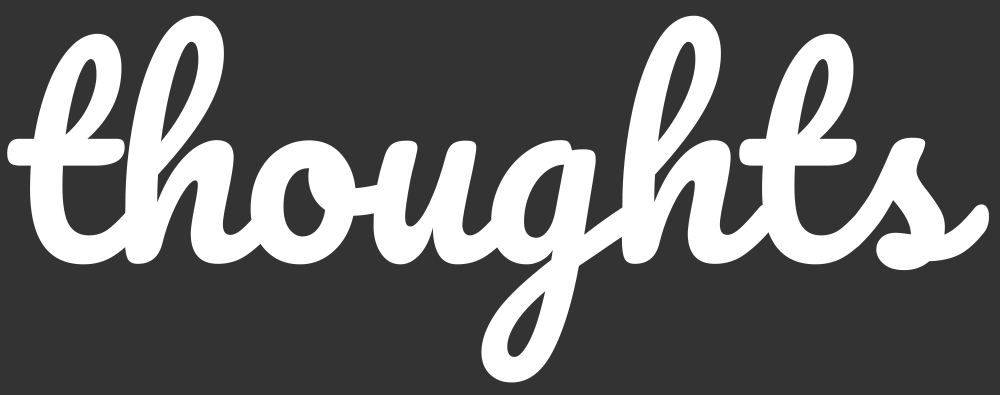
<style>
.page{position:relative;width:1000px;height:395px;background:#333333}
.page>*{position:absolute;margin:0}
.t1{font:262.5px "Pacifico-Regular";color:#ffffff}
</style>
<div class="page">
<p class="t1" style="left:7px;top:15px;width:982px;height:368px">thoughts</p>
</div>
